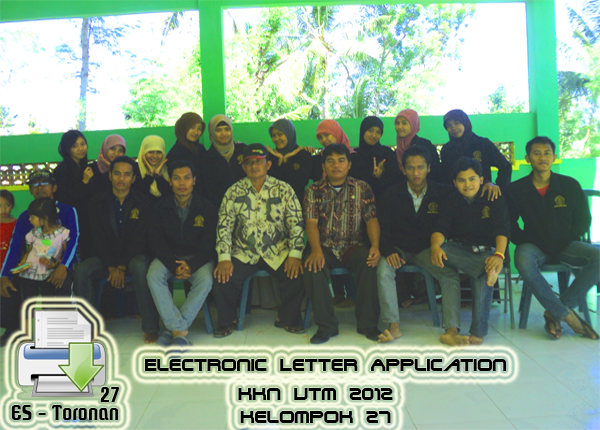
<style>
.page{position:relative;width:600px;height:430px}
.page>*{position:absolute;margin:0}
.t1{font:19px "TerminatorTwo";color:#000000}
</style>
<div class="page">
<p class="t1" style="left:145px;top:359px;width:361px;height:12px">Electronic Letter Application</p>
<p class="t1" style="left:238px;top:388px;width:155px;height:35px;text-align:center">kkn Utm 2012<br>kelompok 27</p>
</div>
